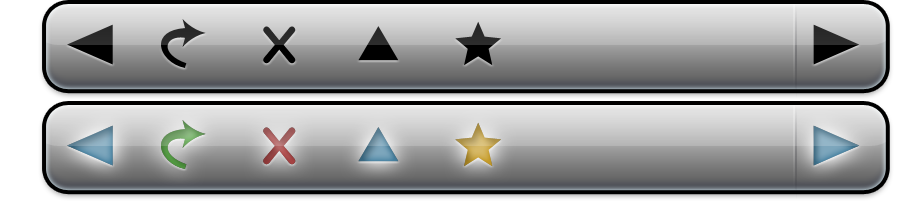
<style>
.page{position:relative;width:922px;height:202px}
.page>*{position:absolute;margin:0}
.t1{font:68.1px "OCRAStd"}
</style>
<div class="page">
<p class="t1" style="left:263px;top:26px;width:33px;height:38px">x</p>
</div>
